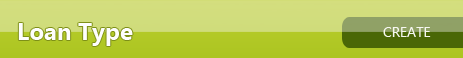
<style>
.page{position:relative;width:463px;height:58px}
.page>*{position:absolute;margin:0}
.t1{font:24px "SegoeUI-Bold";color:#fefefe}
.t2{font:14px "SegoeUI";color:#f6f7f1}
</style>
<div class="page">
<p class="t1" style="left:18px;top:23px;width:115px;height:23px">Loan Type</p>
<p class="t2" style="left:383px;top:27px;width:48px;height:10px">CREATE</p>
</div>
